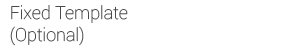
<style>
.page{position:relative;width:300px;height:50px;background:#ffffff}
.page>*{position:absolute;margin:0}
.t1{font:18px "Roboto-Thin";color:#494949}
</style>
<div class="page">
<p class="t1" style="left:10px;top:5px;width:118px;height:41px">Fixed Template <br>(Optional)</p>
</div>
